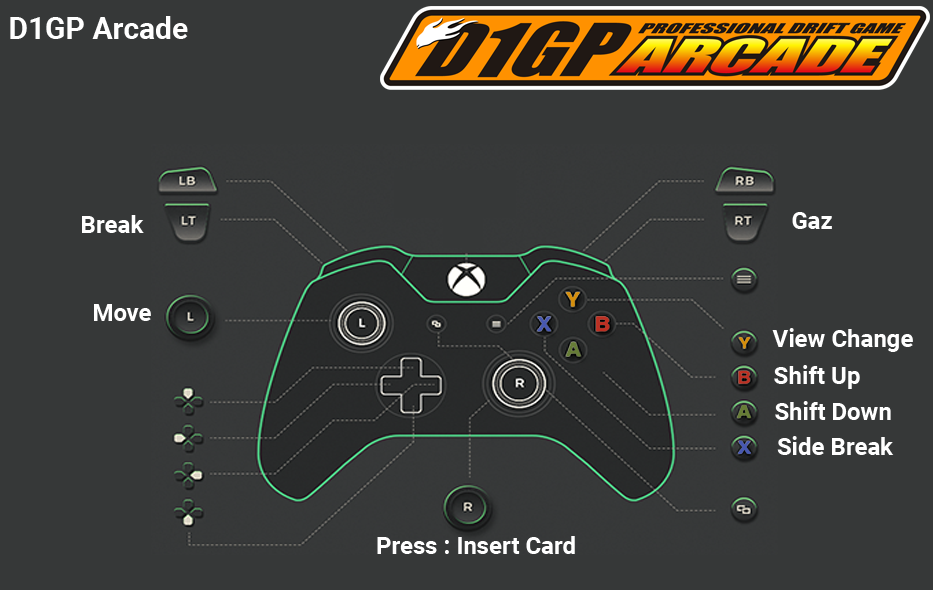
<style>
.page{position:relative;width:933px;height:590px;background:#363838}
.page>*{position:absolute;margin:0}
.t1{font:30px "Roboto-Bold";color:#ffffff}
.t2{font:24px "Roboto-Bold";color:#ffffff}
</style>
<div class="page">
<p class="t1" style="left:10px;top:16px;width:178px;height:23px">D1GP Arcade</p>
<p class="t2" style="left:82px;top:215px;width:62px;height:18px">Break</p>
<p class="t2" style="left:792px;top:212px;width:40px;height:17px">Gaz</p>
<p class="t2" style="left:94px;top:304px;width:57px;height:17px">Move</p>
<p class="t2" style="left:772px;top:328px;width:141px;height:24px">View Change</p>
<p class="t2" style="left:774px;top:365px;width:86px;height:24px">Shift Up</p>
<p class="t2" style="left:775px;top:401px;width:116px;height:19px">Shift Down</p>
<p class="t2" style="left:777px;top:436px;width:117px;height:19px">Side Break</p>
<p class="t2" style="left:377px;top:536px;width:198px;height:18px">Press : Insert Card</p>
</div>
